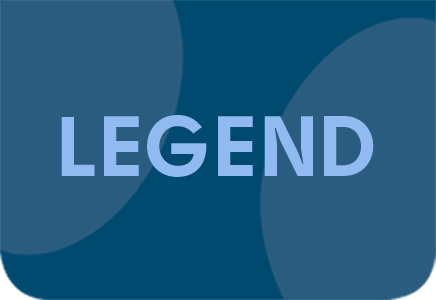
<style>
.page{position:relative;width:436px;height:300px;background:#2a5c80}
.page>*{position:absolute;margin:0}
.t1{font:84.7px "Solomon-Sans-Bold";color:#91baf1}
</style>
<div class="page">
<p class="t1" style="left:61px;top:115px;width:313px;height:62px">LEGEND</p>
</div>
